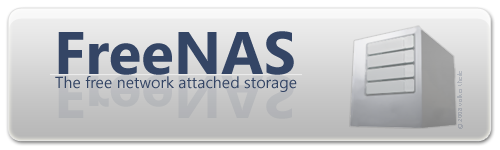
<style>
.page{position:relative;width:500px;height:150px}
.page>*{position:absolute;margin:0}
.t1{font:60px "SegoeUI-Bold";color:#344565}
.t2{font:16px "SegoeUI";color:#344565}
.t3{font:6.3px "Tahoma";color:#a9acb3}
</style>
<div class="page">
<p class="t1" style="left:58px;top:31px;width:236px;height:44px">FreeNAS</p>
<p class="t2" style="left:55px;top:76px;width:242px;height:16px">The free network attached storage</p>
<p class="t3" style="left:457px;top:71px;width:6px;height:58px;rotate:-90deg">© 2008 volker theile</p>
</div>
